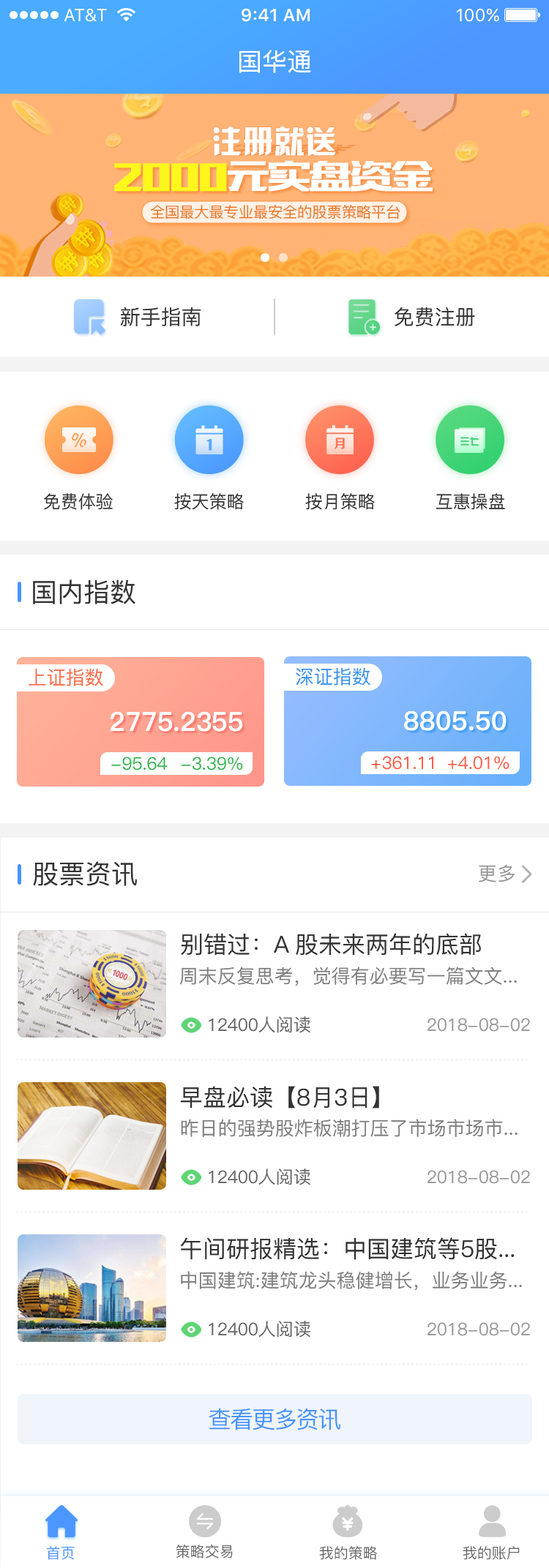
<style>
.page{position:relative;width:549px;height:1568px;background:#ffffff}
.page>*{position:absolute;margin:0}
.t1{font:24.9px "PingFang-SC-Medium";color:#ffffff}
.t2{font:20.5px "PingFang-SC-Medium";color:#333333}
.t3{font:17.6px "PingFang-SC-Medium";color:#333333}
.t4{font:26.3px "PingFang-SC-Medium";color:#333333}
.t5{font:19px "PingFang-SC-Medium";color:#ff6c47}
.t6{font:19px "PingFang-SC-Medium";color:#3a95f0}
.t7{font:26.3px "PingFang-SC-Heavy";color:#ffffff}
.t8{font:17.6px "PingFang-SC-Medium";color:#33b750}
.t9{font:17.6px "PingFang-SC-Medium";color:#ff5d47}
.t10{font:19px "PingFang-SC-Medium";color:#999999}
.t11{font:23.4px "PingFang-SC-Medium";color:#333333}
.t12{font:19px "PingFang-SC-Medium";color:#808080}
.t13{font:17.6px "PingFang-SC-Medium";color:#666666}
.t14{font:17.6px "PingFang-SC-Medium";color:#999999}
.t15{font:23.4px "PingFang-SC-Medium";letter-spacing:-0.06em;color:#4794ff}
.t16{font:14.6px "PingFang-SC-Medium";color:#4794ff}
.t17{font:14.6px "PingFang-SC-Medium";color:#666666}
</style>
<div class="page">
<p class="t1" style="left:239px;top:50px;width:72px;height:23px">国华通</p>
<p class="t2" style="left:120px;top:307px;width:81px;height:19px">新手指南</p>
<p class="t2" style="left:394px;top:307px;width:81px;height:19px">免费注册</p>
<p class="t3" style="left:43px;top:493px;width:70px;height:17px">免费体验</p>
<p class="t3" style="left:174px;top:493px;width:70px;height:17px">按天策略</p>
<p class="t3" style="left:305px;top:493px;width:70px;height:17px">按月策略</p>
<p class="t3" style="left:436px;top:493px;width:69px;height:17px">互惠操盘</p>
<p class="t4" style="left:33px;top:579px;width:102px;height:25px">国内指数</p>
<p class="t5" style="left:29px;top:668px;width:74px;height:18px">上证指数</p>
<p class="t6" style="left:296px;top:667px;width:74px;height:19px">深证指数</p>
<p class="t7" style="left:110px;top:711px;width:133px;height:21px">2775.2355</p>
<p class="t7" style="left:404px;top:710px;width:102px;height:21px">8805.50</p>
<p class="t8" style="left:111px;top:757px;width:57px;height:13px">-95.64</p>
<p class="t8" style="left:181px;top:757px;width:62px;height:13px">-3.39%</p>
<p class="t9" style="left:371px;top:756px;width:62px;height:14px">+361.11</p>
<p class="t9" style="left:447px;top:756px;width:62px;height:14px">+4.01%</p>
<p class="t4" style="left:33px;top:861px;width:104px;height:25px">股票资讯</p>
<p class="t10" style="left:479px;top:864px;width:35px;height:18px">更多</p>
<p class="t11" style="left:181px;top:933px;width:300px;height:23px">别错过：A股未来两年的底部</p>
<p class="t12" style="left:180px;top:967px;width:337px;height:19px">周末反复思考，觉得有必要写一篇文文...</p>
<p class="t13" style="left:209px;top:1016px;width:101px;height:17px">12400人阅读</p>
<p class="t14" style="left:427px;top:1018px;width:103px;height:14px">2018-08-02</p>
<p class="t11" style="left:180px;top:1086px;width:199px;height:23px">早盘必读【8月3日】</p>
<p class="t12" style="left:181px;top:1119px;width:336px;height:18px">昨日的强势股炸板潮打压了市场市场市...</p>
<p class="t13" style="left:209px;top:1169px;width:101px;height:16px">12400人阅读</p>
<p class="t14" style="left:427px;top:1170px;width:103px;height:14px">2018-08-02</p>
<p class="t11" style="left:180px;top:1237px;width:334px;height:23px">午间研报精选：中国建筑等5股...</p>
<p class="t12" style="left:181px;top:1271px;width:341px;height:20px">中国建筑:建筑龙头稳健增长，业务业务...</p>
<p class="t13" style="left:209px;top:1321px;width:101px;height:17px">12400人阅读</p>
<p class="t14" style="left:427px;top:1322px;width:103px;height:14px">2018-08-02</p>
<p class="t15" style="left:209px;top:1408px;width:132px;height:22px">查看更多资讯</p>
<p class="t16" style="left:47px;top:1546px;width:28px;height:14px">首页</p>
<p class="t17" style="left:176px;top:1545px;width:57px;height:13px">策略交易</p>
<p class="t17" style="left:319px;top:1546px;width:58px;height:14px">我的策略</p>
<p class="t17" style="left:462px;top:1546px;width:57px;height:14px">我的账户</p>
</div>
